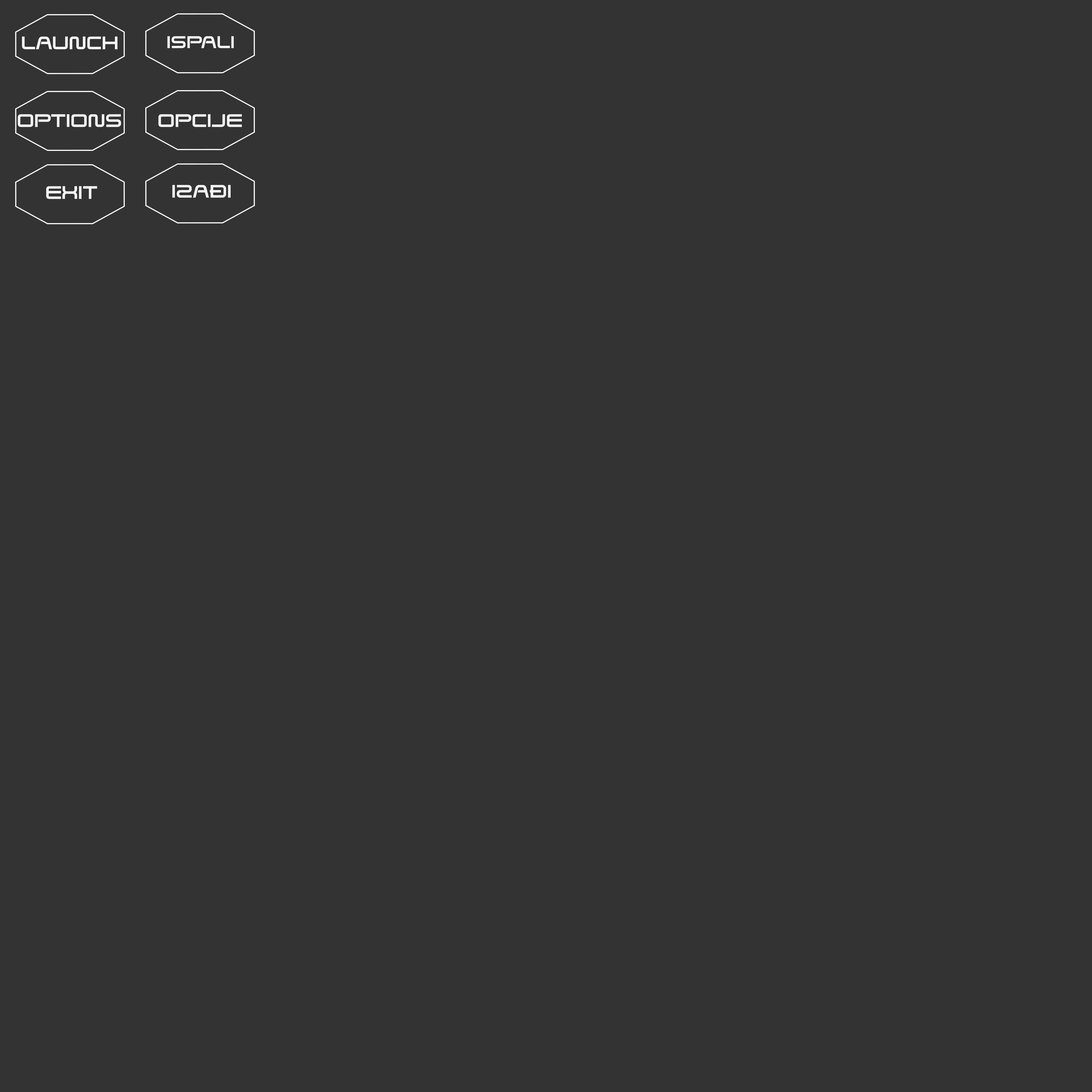
<style>
.page{position:relative;width:1092px;height:1092px;background:#333333}
.page>*{position:absolute;margin:0}
.t1{font:17.8px "SavedByZero-Regular";color:#f5f5f5;font-weight:bold}
.t2{font:16.7px "SavedByZero-Regular";color:#f5f5f5;font-weight:bold}
</style>
<div class="page">
<p class="t1" style="left:22px;top:37px;width:96px;height:12px">LAUNCH</p>
<p class="t2" style="left:167px;top:36px;width:67px;height:12px">ISPALI</p>
<p class="t1" style="left:18px;top:114px;width:103px;height:13px">OPTIONS</p>
<p class="t1" style="left:158px;top:114px;width:84px;height:13px">OPCIJE</p>
<p class="t1" style="left:172px;top:185px;width:59px;height:13px">IZAĐI</p>
<p class="t1" style="left:46px;top:186px;width:51px;height:13px">EXIT</p>
</div>
